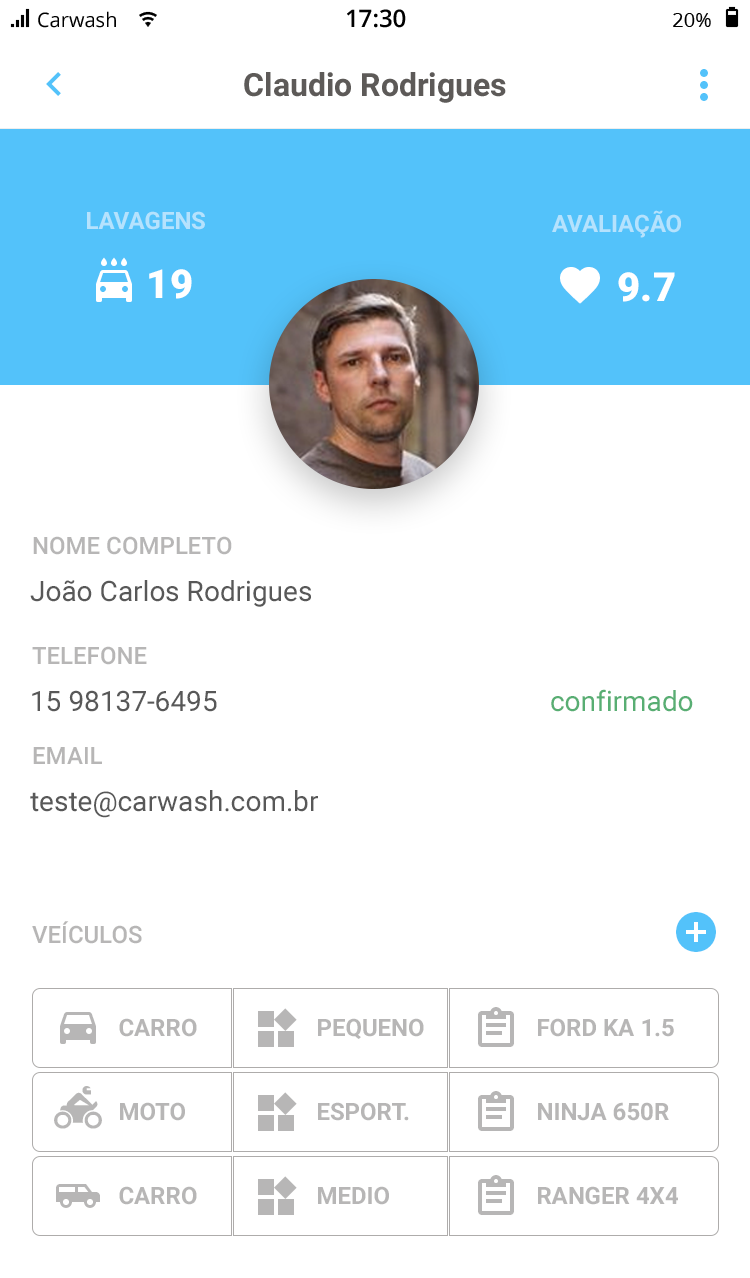
<style>
.page{position:relative;width:750px;height:1278px;background:#ffffff}
.page>*{position:absolute;margin:0}
.t1{font:24px "Roboto-Bold";color:#b5e2fd;text-transform:uppercase}
.t2{font:40px "Roboto-Black";color:#ffffff}
.t3{font:24px "Roboto-Medium";color:#b7b6b6;text-transform:uppercase}
.t4{font:28px "Roboto-Regular";color:#585858}
.t5{font:28px "Roboto-Regular";color:#58ae73}
.t6{font:24px "Roboto-Bold";color:#b7b6b6;text-transform:uppercase}
</style>
<div class="page">
<p class="t1" style="left:87px;top:211px;width:118px;height:19px">Lavagens</p>
<p class="t1" style="left:552px;top:210px;width:129px;height:28px">Avaliação</p>
<p class="t2" style="left:149px;top:269px;width:43px;height:30px">19</p>
<p class="t2" style="left:618px;top:272px;width:57px;height:30px">9.7</p>
<p class="t3" style="left:33px;top:536px;width:199px;height:19px">Nome completo</p>
<p class="t4" style="left:30px;top:580px;width:281px;height:27px">João Carlos Rodrigues</p>
<p class="t3" style="left:32px;top:646px;width:115px;height:19px">Telefone</p>
<p class="t5" style="left:551px;top:689px;width:142px;height:23px">confirmado</p>
<p class="t4" style="left:32px;top:690px;width:185px;height:22px">15 98137-6495</p>
<p class="t3" style="left:33px;top:747px;width:69px;height:17px">email</p>
<p class="t4" style="left:30px;top:790px;width:288px;height:28px">teste@carwash.com.br</p>
<p class="t3" style="left:32px;top:921px;width:110px;height:23px">Veículos</p>
<p class="t6" style="left:119px;top:1018px;width:78px;height:19px">Carro</p>
<p class="t6" style="left:318px;top:1018px;width:106px;height:21px">pequeno</p>
<p class="t6" style="left:538px;top:1018px;width:136px;height:19px">ford ka 1.5</p>
<p class="t6" style="left:120px;top:1102px;width:65px;height:19px">moto</p>
<p class="t6" style="left:318px;top:1102px;width:91px;height:19px">ESPORT.</p>
<p class="t6" style="left:538px;top:1102px;width:131px;height:19px">NINJA 650R</p>
<p class="t6" style="left:119px;top:1186px;width:78px;height:19px">carro</p>
<p class="t6" style="left:318px;top:1186px;width:71px;height:19px">medio</p>
<p class="t6" style="left:538px;top:1186px;width:140px;height:19px">ranger 4x4</p>
</div>
